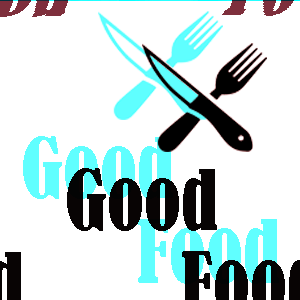
<style>
.page{position:relative;width:300px;height:300px;background:#ffffff}
.page>*{position:absolute;margin:0}
.t1{font:77px/23.8px "BernardMT-Condensed";color:#60ffff}
.t2{font:81.3px "BernardMT-Condensed";color:#60ffff;scale:0.96 1}
</style>
<div class="page">
<p class="t1" style="left:23px;top:135px;width:150px;height:63px">Good<br><br>Food</p>
<p class="t2" style="left:138px;top:218px;width:141px;height:65px">Food</p>
</div>
